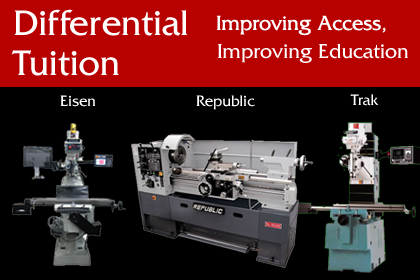
<style>
.page{position:relative;width:420px;height:280px;background:#000000}
.page>*{position:absolute;margin:0}
.t1{font:37.3px/40px "FrizQuadrataStd";color:#ffffff}
.t2{font:21.3px "FrizQuadrataStd";color:#ffffff}
.t3{font:16px "FrizQuadrataStd";color:#ffffff}
</style>
<div class="page">
<p class="t1" style="left:11px;top:9px;width:177px;height:67px">Differential <br>Tuition</p>
<p class="t2" style="left:216px;top:15px;width:170px;height:21px">Improving Access,</p>
<p class="t2" style="left:217px;top:43px;width:191px;height:20px">Improving Education</p>
<p class="t3" style="left:60px;top:95px;width:36px;height:12px">Eisen</p>
<p class="t3" style="left:196px;top:95px;width:59px;height:15px">Republic</p>
<p class="t3" style="left:350px;top:94px;width:29px;height:12px">Trak</p>
</div>
